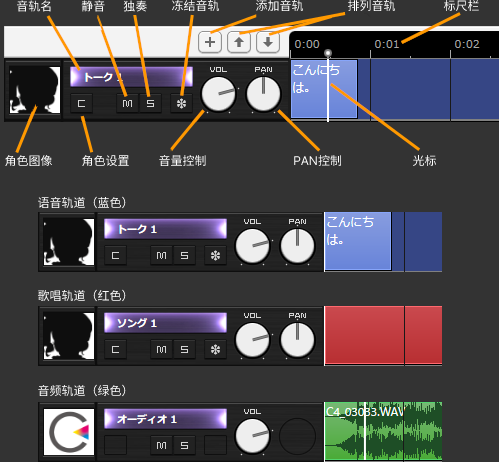
<style>
.page{position:relative;width:499px;height:462px;background:#333333}
.page>*{position:absolute;margin:0}
.t1{font:12px "Sarasa-Gothic-SC-Regular";color:#ffffff}
</style>
<div class="page">
<p class="t1" style="left:17px;top:0px;width:34px;height:12px">音轨名</p>
<p class="t1" style="left:81px;top:0px;width:24px;height:12px">静音</p>
<p class="t1" style="left:123px;top:0px;width:24px;height:12px">独奏</p>
<p class="t1" style="left:172px;top:0px;width:47px;height:11px">冻结音轨</p>
<p class="t1" style="left:256px;top:0px;width:47px;height:11px">添加音轨</p>
<p class="t1" style="left:348px;top:0px;width:47px;height:11px">排列音轨</p>
<p class="t1" style="left:443px;top:0px;width:36px;height:11px">标尺栏</p>
<p class="t1" style="left:5px;top:155px;width:47px;height:11px">角色图像</p>
<p class="t1" style="left:82px;top:155px;width:47px;height:11px">角色设置</p>
<p class="t1" style="left:159px;top:155px;width:47px;height:11px">音量控制</p>
<p class="t1" style="left:294px;top:155px;width:47px;height:11px">PAN控制</p>
<p class="t1" style="left:413px;top:155px;width:23px;height:11px">光标</p>
<p class="t1" style="left:38px;top:196px;width:88px;height:13px">语音轨道（蓝色）</p>
<p class="t1" style="left:38px;top:289px;width:88px;height:13px">歌唱轨道（红色）</p>
<p class="t1" style="left:38px;top:384px;width:88px;height:13px">音频轨道（绿色）</p>
</div>
